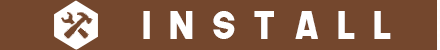
<style>
.page{position:relative;width:440px;height:50px;background:#74472d}
.page>*{position:absolute;margin:0}
.t1{font:37.5px "TheNextFont";letter-spacing:0.48em;color:#ffffff}
</style>
<div class="page">
<p class="t1" style="left:143px;top:11px;width:248px;height:28px">INSTALL</p>
</div>
